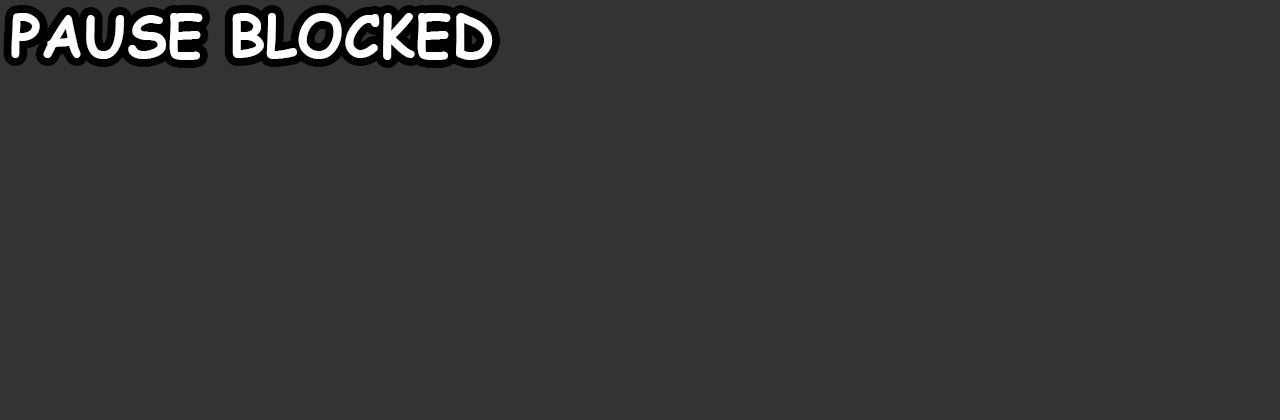
<style>
.page{position:relative;width:1280px;height:420px;background:#333333}
.page>*{position:absolute;margin:0}
.t1{font:58.2px "ComicSansMS-Bold";color:#ffffff}
</style>
<div class="page">
<p class="t1" style="left:11px;top:13px;width:482px;height:47px">PAUSE BLOCKED</p>
</div>
